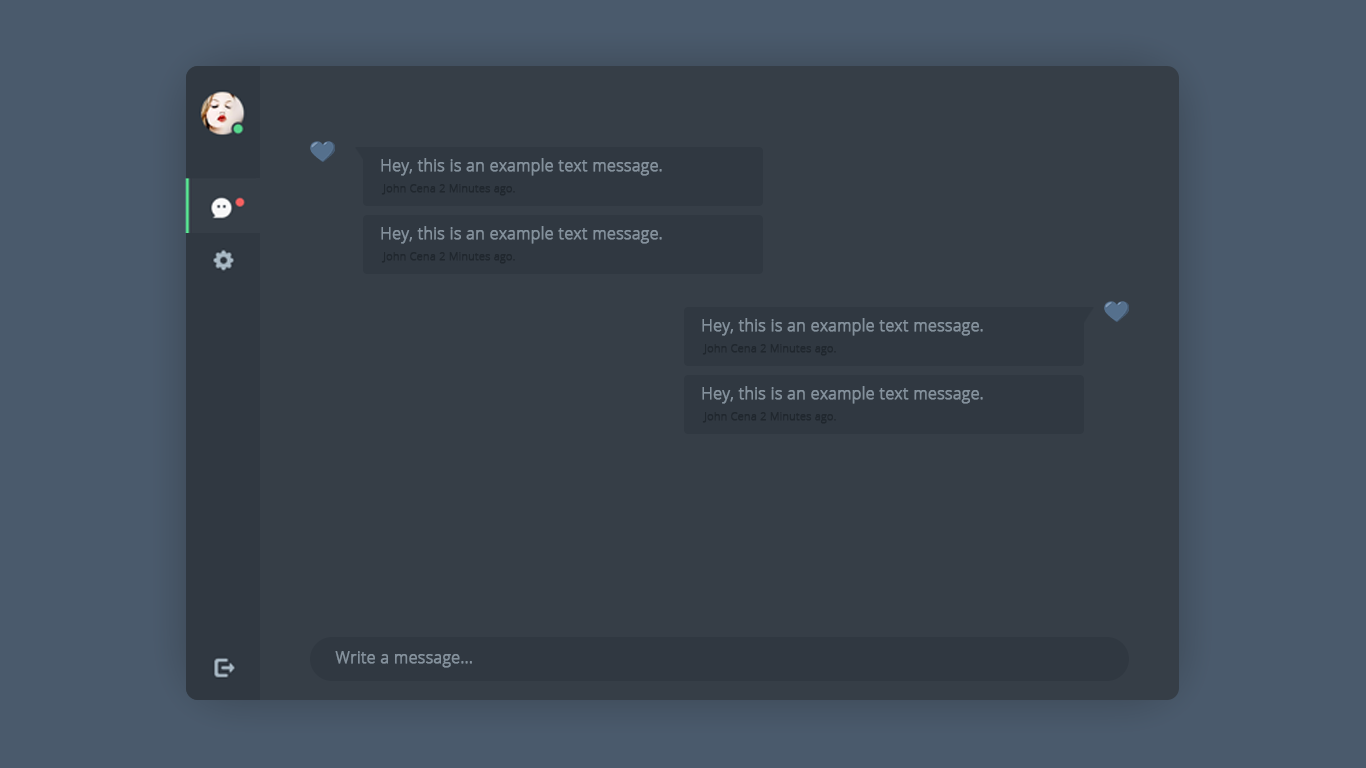
<style>
.page{position:relative;width:1366px;height:768px;background:#363e47}
.page>*{position:absolute;margin:0}
.t1{font:16px "OpenSans-Light";color:#84919c;font-weight:bold}
.t2{font:11px "OpenSans-Light";color:#20272e;font-weight:bold}
</style>
<div class="page">
<p class="t1" style="left:381px;top:158px;width:281px;height:18px">Hey, this is an example text message.</p>
<p class="t2" style="left:381px;top:184px;width:134px;height:12px">John Cena 2 Minutes ago.</p>
<p class="t1" style="left:381px;top:226px;width:281px;height:18px">Hey, this is an example text message.</p>
<p class="t2" style="left:381px;top:252px;width:134px;height:12px">John Cena 2 Minutes ago.</p>
<p class="t1" style="left:702px;top:318px;width:281px;height:18px">Hey, this is an example text message.</p>
<p class="t2" style="left:702px;top:344px;width:134px;height:12px">John Cena 2 Minutes ago.</p>
<p class="t1" style="left:702px;top:386px;width:281px;height:18px">Hey, this is an example text message.</p>
<p class="t2" style="left:702px;top:412px;width:134px;height:12px">John Cena 2 Minutes ago.</p>
<p class="t1" style="left:335px;top:651px;width:137px;height:17px">Write a message...</p>
</div>
